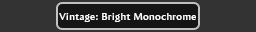
<style>
.page{position:relative;width:256px;height:32px;background:#333333}
.page>*{position:absolute;margin:0}
.t1{font:9.8px "AmiraParadiso";letter-spacing:0.05em;color:#ffffff}
</style>
<div class="page">
<p class="t1" style="left:59px;top:13px;width:137px;height:9px">Vintage: Bright Monochrome</p>
</div>
